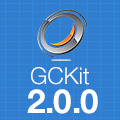
<style>
.page{position:relative;width:120px;height:120px;background:#327ece}
.page>*{position:absolute;margin:0}
.t1{font:23.2px "HelveticaNeue-Light";color:#fefefe}
.t2{font:33.1px "HelveticaNeue-Bold";letter-spacing:-0.012em;color:#fefefe}
</style>
<div class="page">
<p class="t1" style="left:31px;top:67px;width:58px;height:18px">GCKit</p>
<p class="t2" style="left:27px;top:89px;width:71px;height:25px">2.0.0</p>
</div>
